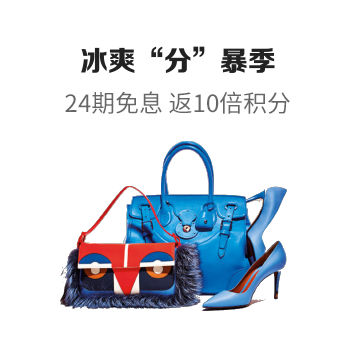
<style>
.page{position:relative;width:356px;height:352px;background:#ffffff}
.page>*{position:absolute;margin:0}
.t1{font:28px "SourceHanSansCN-Bold";color:#222222}
.t2{font:24px "SourceHanSansCN-Regular";color:#666666}
</style>
<div class="page">
<p class="t1" style="left:81px;top:46px;width:194px;height:27px">冰爽“分”暴季</p>
<p class="t2" style="left:65px;top:91px;width:225px;height:23px">24期免息 返10倍积分</p>
<p class="t2" style="left:65px;top:91px;width:225px;height:23px">24期免息 返10倍积分</p>
<p class="t2" style="left:65px;top:91px;width:225px;height:23px">24期免息 返10倍积分</p>
</div>
